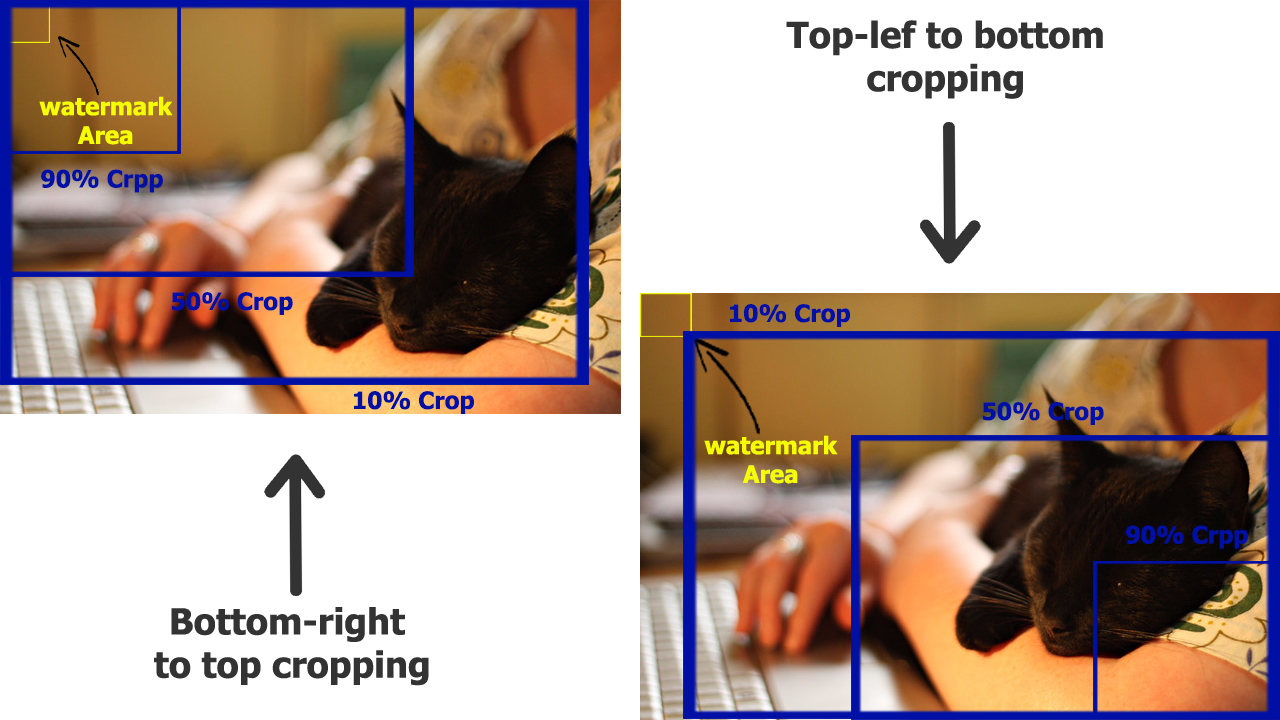
<style>
.page{position:relative;width:1280px;height:720px;background:#ffffff}
.page>*{position:absolute;margin:0}
.t1{font:36px "Tahoma-Bold";color:#333333}
.t2{font:24px "Tahoma-Bold";color:#f6ff00}
.t3{font:24px "Tahoma-Bold";color:#000fa4}
</style>
<div class="page">
<p class="t1" style="left:786px;top:20px;width:317px;height:79px;text-align:center">Top-lef to bottom<br>cropping</p>
<p class="t2" style="left:39px;top:96px;width:134px;height:49px;text-align:center">watermark<br>Area</p>
<p class="t3" style="left:41px;top:169px;width:122px;height:24px">90% Crpp</p>
<p class="t3" style="left:171px;top:292px;width:122px;height:23px">50% Crop</p>
<p class="t3" style="left:730px;top:304px;width:120px;height:23px">10% Crop</p>
<p class="t3" style="left:354px;top:391px;width:120px;height:23px">10% Crop</p>
<p class="t3" style="left:982px;top:402px;width:122px;height:23px">50% Crop</p>
<p class="t2" style="left:704px;top:435px;width:134px;height:49px;text-align:center">watermark<br>Area</p>
<p class="t3" style="left:1126px;top:525px;width:122px;height:24px">90% Crpp</p>
<p class="t1" style="left:154px;top:607px;width:275px;height:79px;text-align:center">Bottom-right <br>to top cropping</p>
</div>
